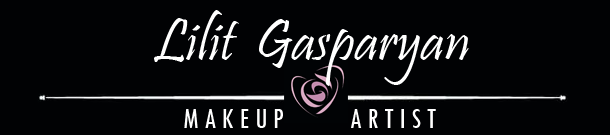
<style>
.page{position:relative;width:610px;height:135px;background:#010204}
.page>*{position:absolute;margin:0}
.t1{font:60px "Pristina-Regular";color:#ffffff}
.t2{font:30px "TwCenMT-Condensed";color:#ffffff}
</style>
<div class="page">
<p class="t1" style="left:154px;top:10px;width:315px;height:76px">Lilit  Gasparyan</p>
<p class="t2" style="left:184px;top:109px;width:252px;height:19px">M A K E U P            A R T I S T</p>
</div>
